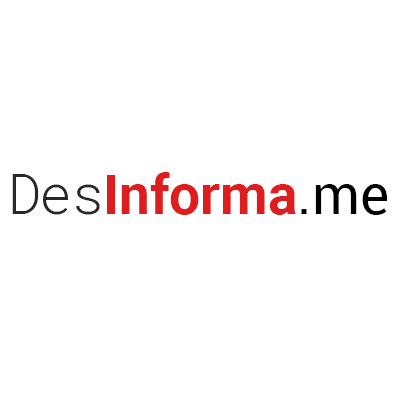
<style>
.page{position:relative;width:400px;height:400px;background:#ffffff}
.page>*{position:absolute;margin:0}
.t1{font:55px "Roboto-Bold";color:#de1e1e}
.t2{font:55px "RobotoMonoForPowerline-Light";letter-spacing:-0.025em;color:#282828}
.t3{font:55px "Roboto-Regular";color:#000000}
</style>
<div class="page">
<p class="t1" style="left:12px;top:172px;width:375px;height:43px"><span class="t2">Des</span>Informa<span class="t3">.me</span></p>
</div>
